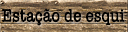
<style>
.page{position:relative;width:128px;height:32px}
.page>*{position:absolute;margin:0}
.t1{font:18px "AmericanTypewriter";color:#000000;font-weight:bold;scale:0.82 1}
</style>
<div class="page">
<p class="t1" style="left:2px;top:9px;width:123px;height:17px">Estação de esqui</p>
</div>
